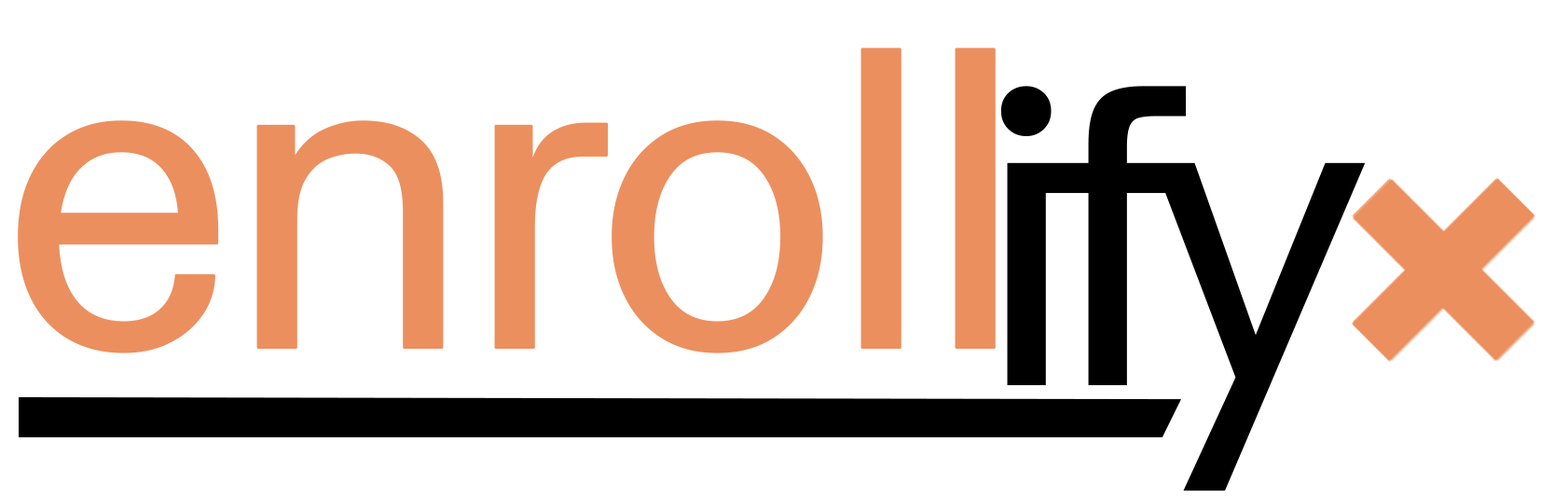
<style>
.page{position:relative;width:1568px;height:497px;background:#ffffff}
.page>*{position:absolute;margin:0}
.t1{font:426.7px "HedvigLettersSans-Regular";letter-spacing:-0.06em;color:#ec8f5e;font-weight:bold}
</style>
<div class="page">
<p class="t1" style="left:18px;top:48px;width:978px;height:305px">enroll</p>
</div>
